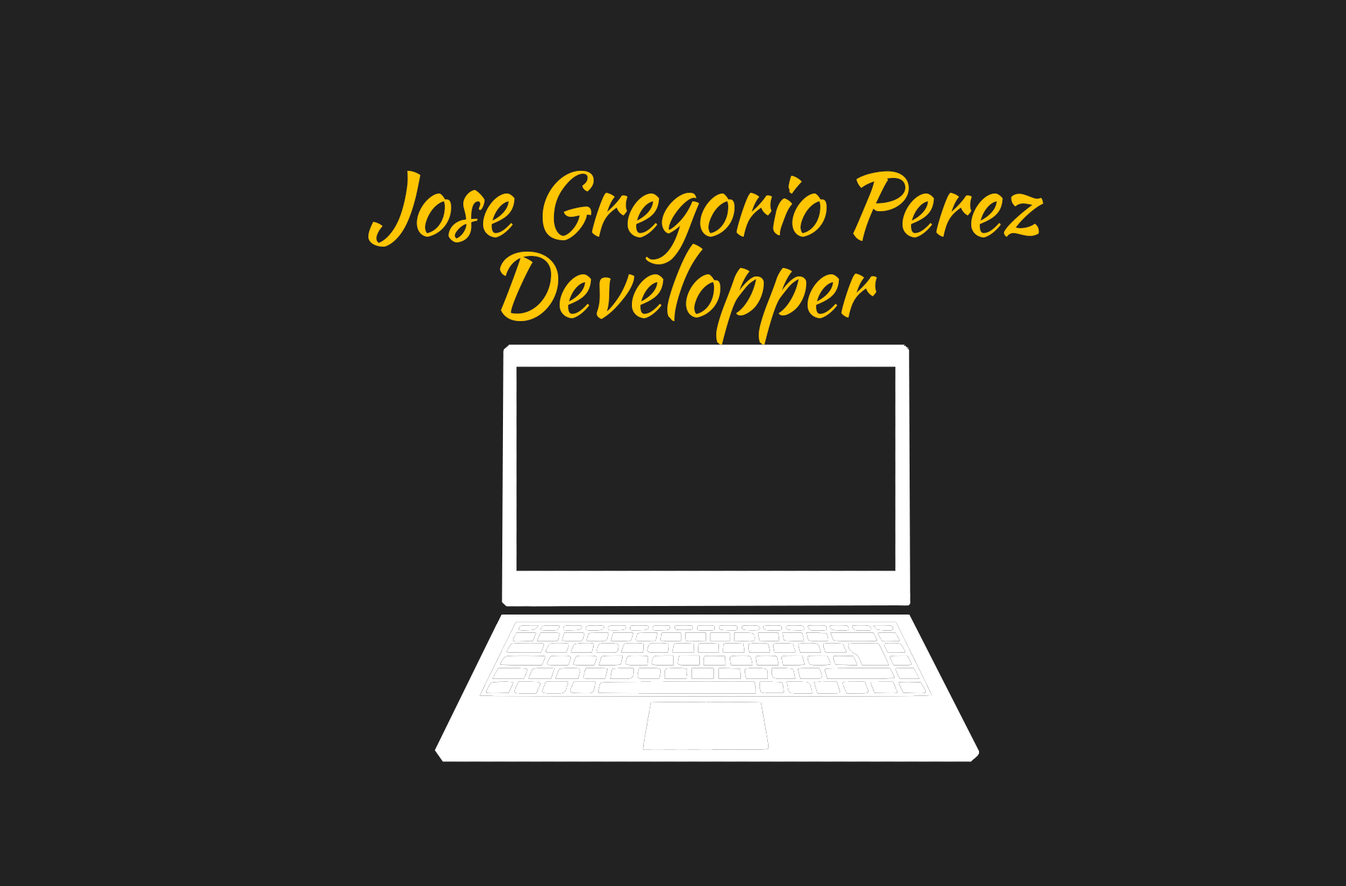
<style>
.page{position:relative;width:1346px;height:886px;background:#222222}
.page>*{position:absolute;margin:0}
.t1{font:85px "KaushanScript-Regular";color:#fec503}
</style>
<div class="page">
<p class="t1" style="left:368px;top:171px;width:676px;height:93px">Jose Gregorio Perez</p>
<p class="t1" style="left:500px;top:244px;width:377px;height:102px">Developper</p>
</div>
